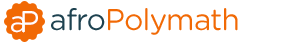
<style>
.page{position:relative;width:288px;height:43px;background:#ffffff}
.page>*{position:absolute;margin:0}
.t1{font:30px "GothamRounded-Book";letter-spacing:-0.24em;color:#ffffff}
.t2{font:30px "GothamRounded-Book";letter-spacing:-0.03em;color:#f16905}
.t3{font:30px "GothamRounded-Book";letter-spacing:-0.03em;color:#1e4250}
</style>
<div class="page">
<p class="t1" style="left:11px;top:11px;width:27px;height:22px">aP</p>
<p class="t2" style="left:51px;top:8px;width:187px;height:27px"><span class="t3">afro</span>Polymath</p>
</div>
